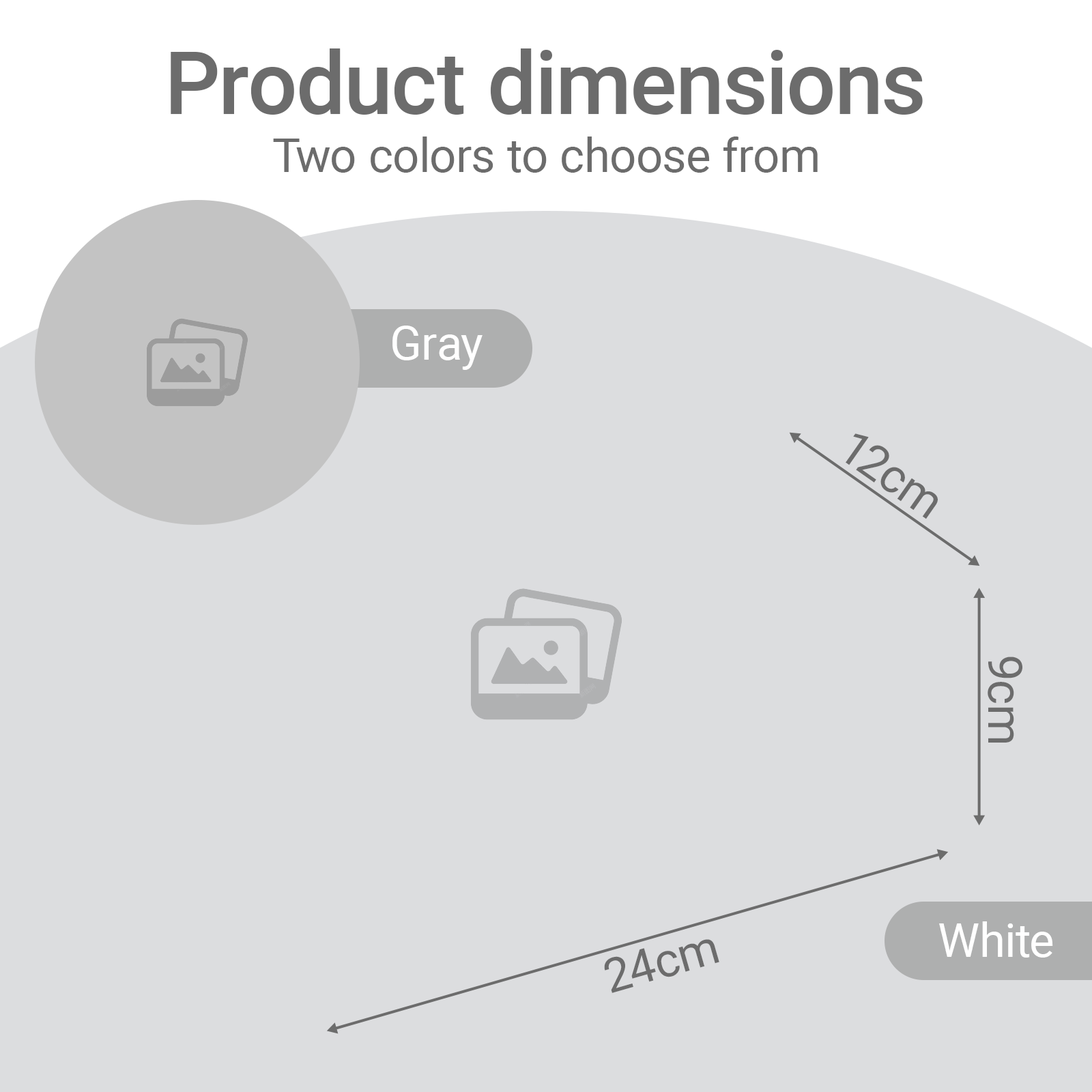
<style>
.page{position:relative;width:1092px;height:1092px;background:#dcdddf}
.page>*{position:absolute;margin:0}
.t1{font:87.4px "Roboto-Medium";color:#6c6c6c}
.t2{font:47.3px "Roboto-Regular";color:#6c6c6c}
.t3{font:47.3px "Roboto-Regular";color:#ffffff}
</style>
<div class="page">
<p class="t1" style="left:171px;top:48px;width:752px;height:67px">Product dimensions</p>
<p class="t2" style="left:273px;top:136px;width:545px;height:37px">Two colors to choose from</p>
<p class="t3" style="left:392px;top:326px;width:91px;height:44px">Gray</p>
<p class="t2" style="left:846px;top:433px;width:92px;height:86px;rotate:35deg">12cm</p>
<p class="t2" style="left:988px;top:657px;width:34px;height:86px;rotate:90deg">9cm</p>
<p class="t3" style="left:939px;top:921px;width:114px;height:37px">White</p>
<p class="t2" style="left:604px;top:939px;width:115px;height:54px;rotate:-16deg">24cm</p>
</div>
